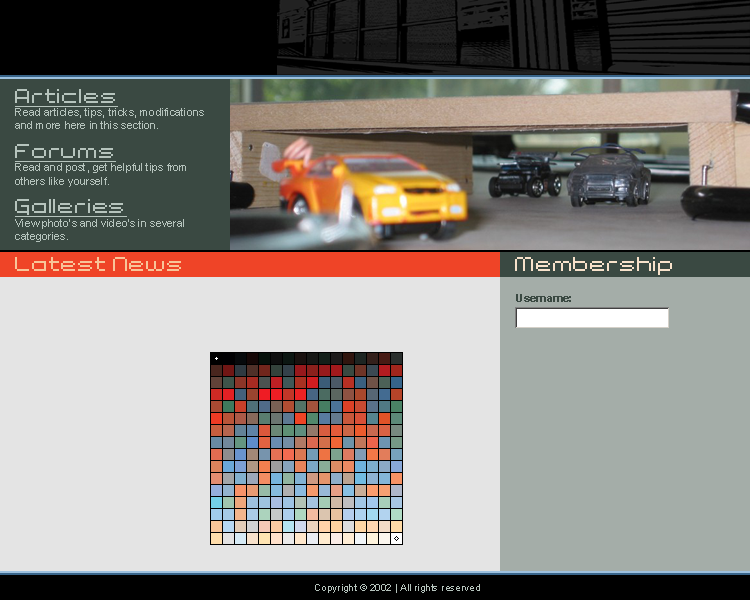
<style>
.page{position:relative;width:750px;height:600px;background:#e4e4e4}
.page>*{position:absolute;margin:0}
.t1{font:11px "ArialMT";color:#b6c4bd}
.t2{font:24px "Bit1";letter-spacing:-0.05em;color:#b6c4bd;text-decoration:underline}
.t3{font:24px "Bit1";letter-spacing:-0.05em;color:#f8c599}
.t4{font:24px "Bit1";letter-spacing:-0.05em;color:#f8e2cb}
.t5{font:11px "Arial-BoldMT";color:#3a4942}
.t6{font:10px "ArialMT";color:#b6c4bd}
</style>
<div class="page">
<p class="t1" style="left:15px;top:89px;width:189px;height:153px"><span class="t2">Articles<br></span>Read articles, tips, tricks, modifications<br>and more here in this section.<br><span class="t2">Forums<br></span>Read and post, get helpful tips from<br>others like yourself.<br><span class="t2">Galleries<br></span>View photo's and video's in several<br>categories.</p>
<p class="t3" style="left:15px;top:257px;width:166px;height:14px">Latest News</p>
<p class="t4" style="left:515px;top:257px;width:157px;height:18px">Membership</p>
<p class="t5" style="left:516px;top:294px;width:55px;height:8px">Username:</p>
<p class="t6" style="left:315px;top:584px;width:165px;height:9px">Copyright © 2002 | All rights reserved</p>
</div>
